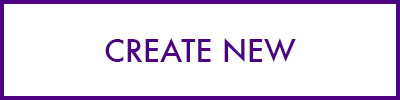
<style>
.page{position:relative;width:400px;height:100px;background:#ffffff}
.page>*{position:absolute;margin:0}
.t1{font:30px "Futura-Medium";color:#4c0282}
</style>
<div class="page">
<p class="t1" style="left:105px;top:38px;width:191px;height:24px">CREATE NEW</p>
</div>
